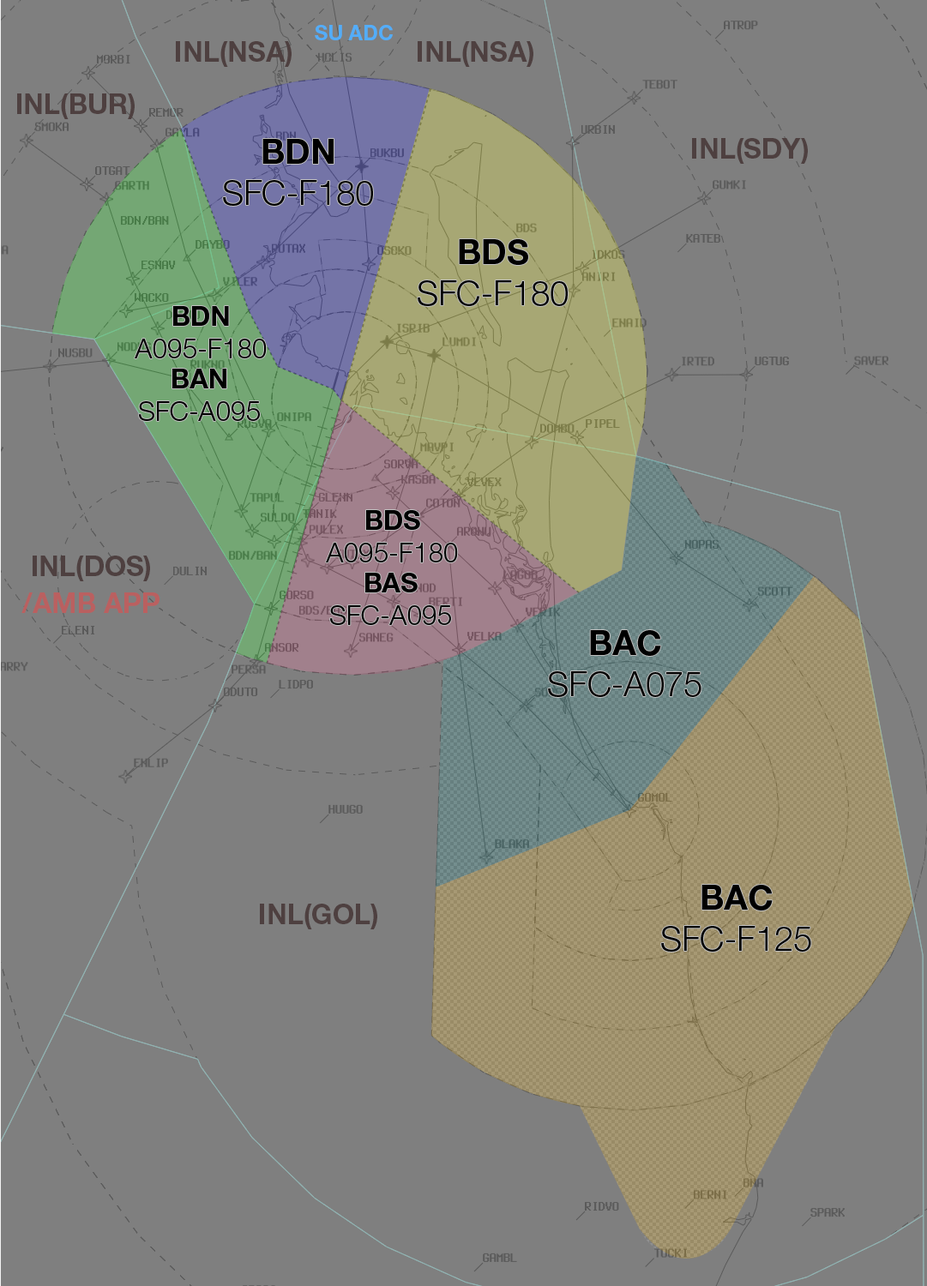
<style>
.page{position:relative;width:927px;height:1286px;background:#7f7f7f}
.page>*{position:absolute;margin:0}
.t1{font:20.5px "HelveticaNeueLTStd-Bd";color:#53adf9}
.t2{font:27.6px "HelveticaNeueLTStd-Bd";color:#4e4040}
.t3{font:34.3px "HelveticaNeueLTStd-Lt";color:#000000}
.t4{font:34.3px "HelveticaNeueLTStd-Bd";color:#000000}
.t5{font:27.1px "HelveticaNeueLTStd-Lt";color:#000000}
.t6{font:27.1px "HelveticaNeueLTStd-Bd";color:#000000}
.t7{font:27.6px "HelveticaNeueLTStd-Bd";color:#ba6060}
</style>
<div class="page">
<p class="t1" style="left:315px;top:25px;width:78px;height:15px">SU ADC</p>
<p class="t2" style="left:176px;top:41px;width:116px;height:26px">INL(NSA)</p>
<p class="t2" style="left:418px;top:41px;width:115px;height:26px">INL(NSA)</p>
<p class="t2" style="left:17px;top:93px;width:118px;height:26px">INL(BUR)</p>
<p class="t3" style="left:223px;top:139px;width:150px;height:67px;text-align:center"><span class="t4">BDN<br></span>SFC-F180</p>
<p class="t2" style="left:692px;top:138px;width:116px;height:26px">INL(SDY)</p>
<p class="t3" style="left:418px;top:239px;width:150px;height:67px;text-align:center"><span class="t4">BDS<br></span>SFC-F180</p>
<p class="t5" style="left:135px;top:306px;width:132px;height:52px;text-align:center"><span class="t6">BDN<br></span>A095-F180</p>
<p class="t5" style="left:139px;top:369px;width:121px;height:52px;text-align:center"><span class="t6">BAN<br></span>SFC-A095</p>
<p class="t5" style="left:326px;top:510px;width:132px;height:53px;text-align:center"><span class="t6">BDS<br></span>A095-F180</p>
<p class="t2" style="left:33px;top:556px;width:117px;height:25px">INL(DOS)</p>
<p class="t5" style="left:330px;top:573px;width:121px;height:52px;text-align:center"><span class="t6">BAS<br></span>SFC-A095</p>
<p class="t7" style="left:21px;top:593px;width:139px;height:20px">/AMB APP</p>
<p class="t3" style="left:548px;top:630px;width:153px;height:67px;text-align:center"><span class="t4">BAC<br></span>SFC-A075</p>
<p class="t3" style="left:661px;top:885px;width:150px;height:67px;text-align:center"><span class="t4">BAC<br></span>SFC-F125</p>
<p class="t2" style="left:260px;top:904px;width:117px;height:26px">INL(GOL)</p>
</div>
